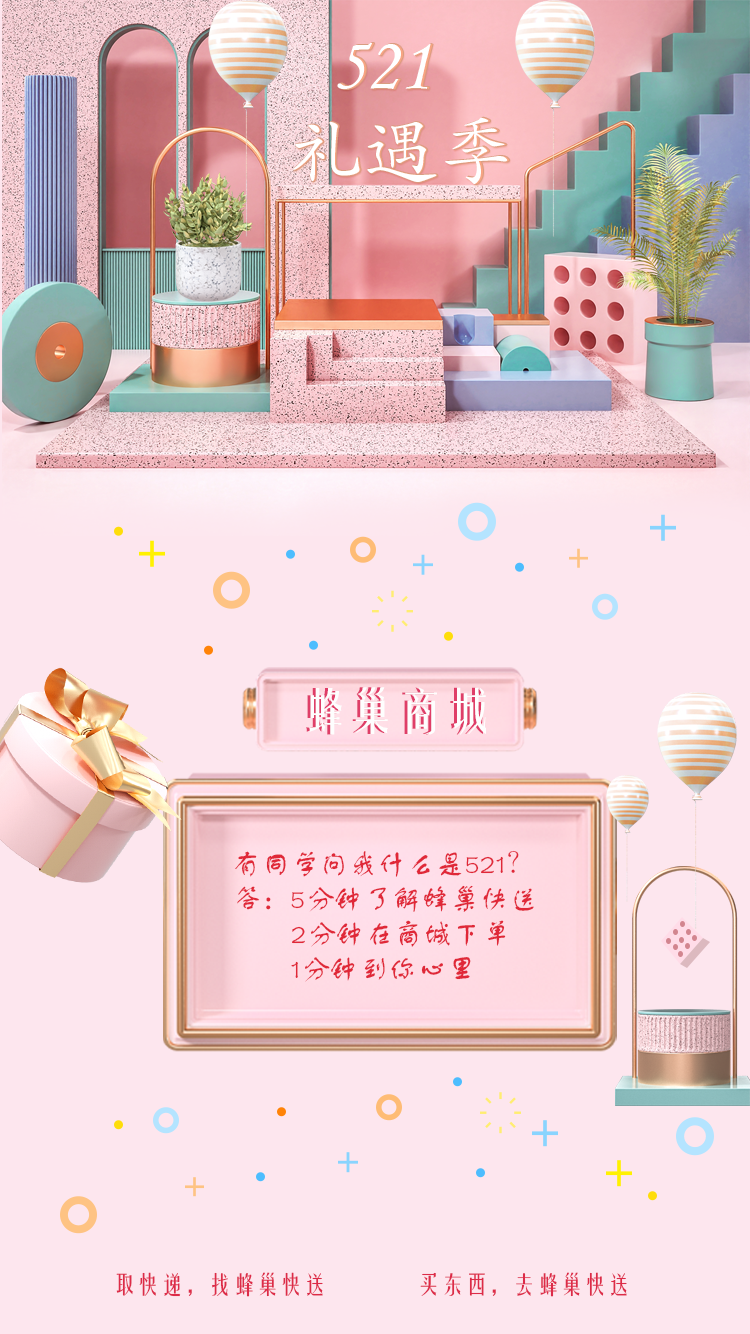
<style>
.page{position:relative;width:750px;height:1334px;background:#fde6ee}
.page>*{position:absolute;margin:0}
.t1{font:75.2px "STLiti";color:#ffffff}
.t2{font:75.2px "MicrosoftYaHei";color:#ffffff}
.t3{font:75.2px "AdobeKaitiStd-Regular";color:#ffffff}
.t4{font:48px "FZYTK--GBK1-0"}
.t5{font:48px "FZYTK--GBK1-0";color:#fefefe}
.t6{font:29.1px "FZSTK--GBK1-0";color:#e02838}
.t7{font:23.9px "FZYTK--GBK1-0";color:#dd2b48}
</style>
<div class="page">
<p class="t1" style="left:293px;top:43px;width:215px;height:141px"><span class="t2">  </span>521<br><span class="t3">礼遇季</span></p>
<p class="t1" style="left:294px;top:43px;width:216px;height:141px"><span class="t2">  </span>521<br><span class="t3">礼遇季</span></p>
<p class="t4" style="left:306px;top:687px;width:177px;height:48px">蜂巢商城</p>
<p class="t5" style="left:309px;top:687px;width:177px;height:48px">蜂巢商城</p>
<p class="t6" style="left:235px;top:850px;width:299px;height:132px">有同学问我什么是521？<br>答：5分钟了解蜂巢快送<br>    2分钟在商城下单<br>      1分钟到你心里</p>
<p class="t7" style="left:116px;top:1272px;width:511px;height:25px">取快递，找蜂巢快送     买东西，去蜂巢快送</p>
</div>
